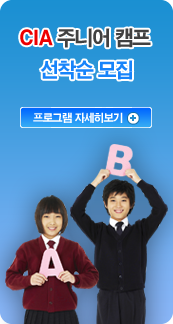
<style>
.page{position:relative;width:173px;height:324px}
.page>*{position:absolute;margin:0}
.t1{font:20px "H2gtrE";letter-spacing:-0.075em;color:#414141;scale:0.95 1}
.t2{font:20px "H2gtrE";letter-spacing:-0.075em;color:#ee0000;scale:0.95 1}
.t3{font:20px "H2gtrE";letter-spacing:-0.075em;color:#1784fa;scale:0.95 1}
.t4{font:11px "H2gtrE";letter-spacing:-0.075em;color:#ffffff;scale:0.95 1}
</style>
<div class="page">
<p class="t1" style="left:20px;top:28px;width:131px;height:20px"><span class="t2">CIA</span> 주니어 캠프</p>
<p class="t3" style="left:40px;top:60px;width:93px;height:20px">선착순 모집</p>
<p class="t4" style="left:33px;top:112px;width:90px;height:11px">프로그램 자세히보기</p>
</div>
